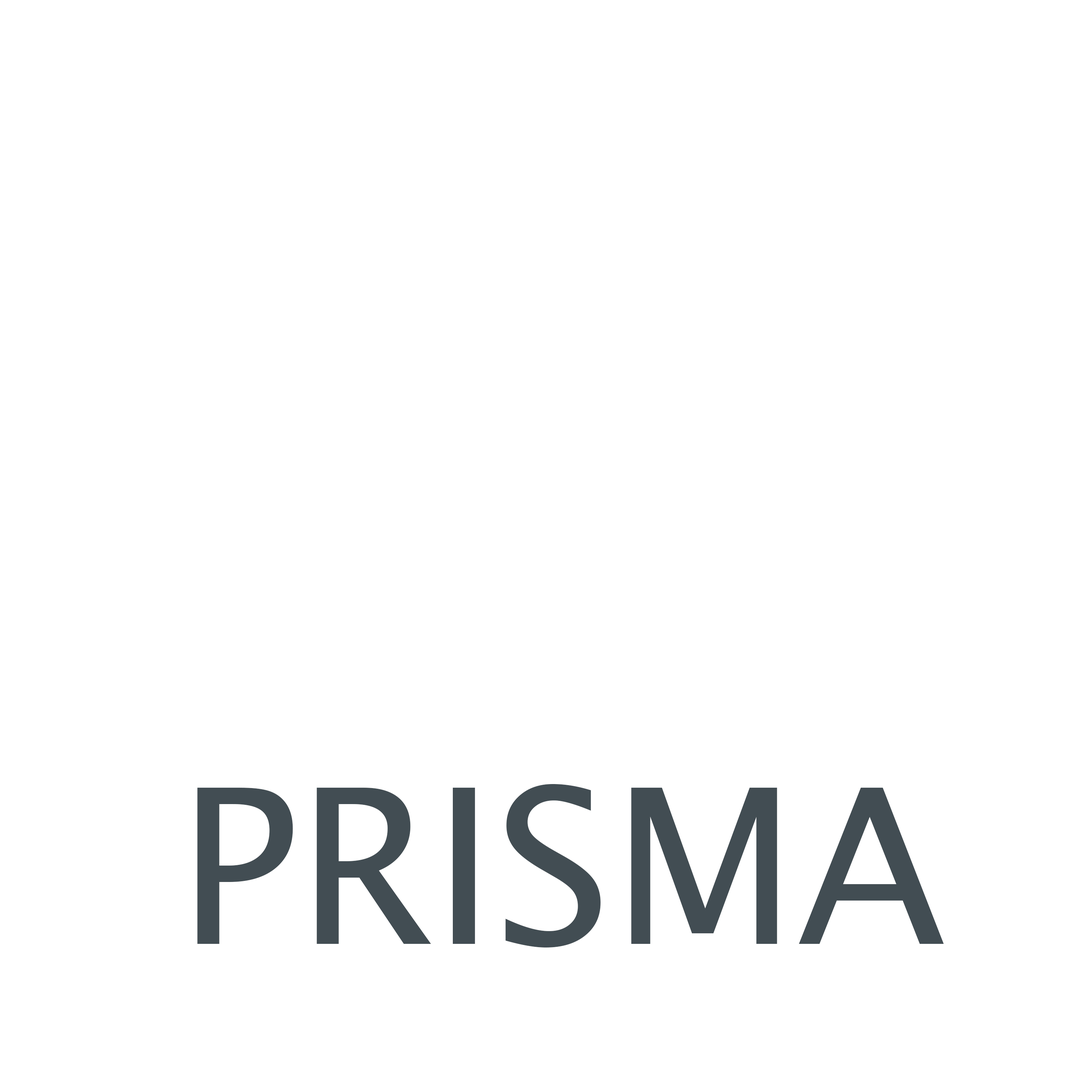
<style>
.page{position:relative;width:1092px;height:1092px;background:#ffffff}
.page>*{position:absolute;margin:0}
.t1{font:215.7px "LucidaSansUnicode";color:#424d53}
</style>
<div class="page">
<p class="t1" style="left:197px;top:784px;width:747px;height:163px">PRISMA</p>
</div>
